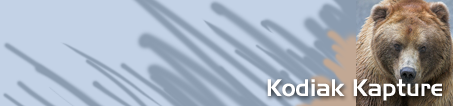
<style>
.page{position:relative;width:453px;height:106px;background:#c3d2e6}
.page>*{position:absolute;margin:0}
.t1{font:24px "Slicker";color:#ffffff}
</style>
<div class="page">
<p class="t1" style="left:267px;top:79px;width:175px;height:22px">Kodiak Kapture</p>
</div>
